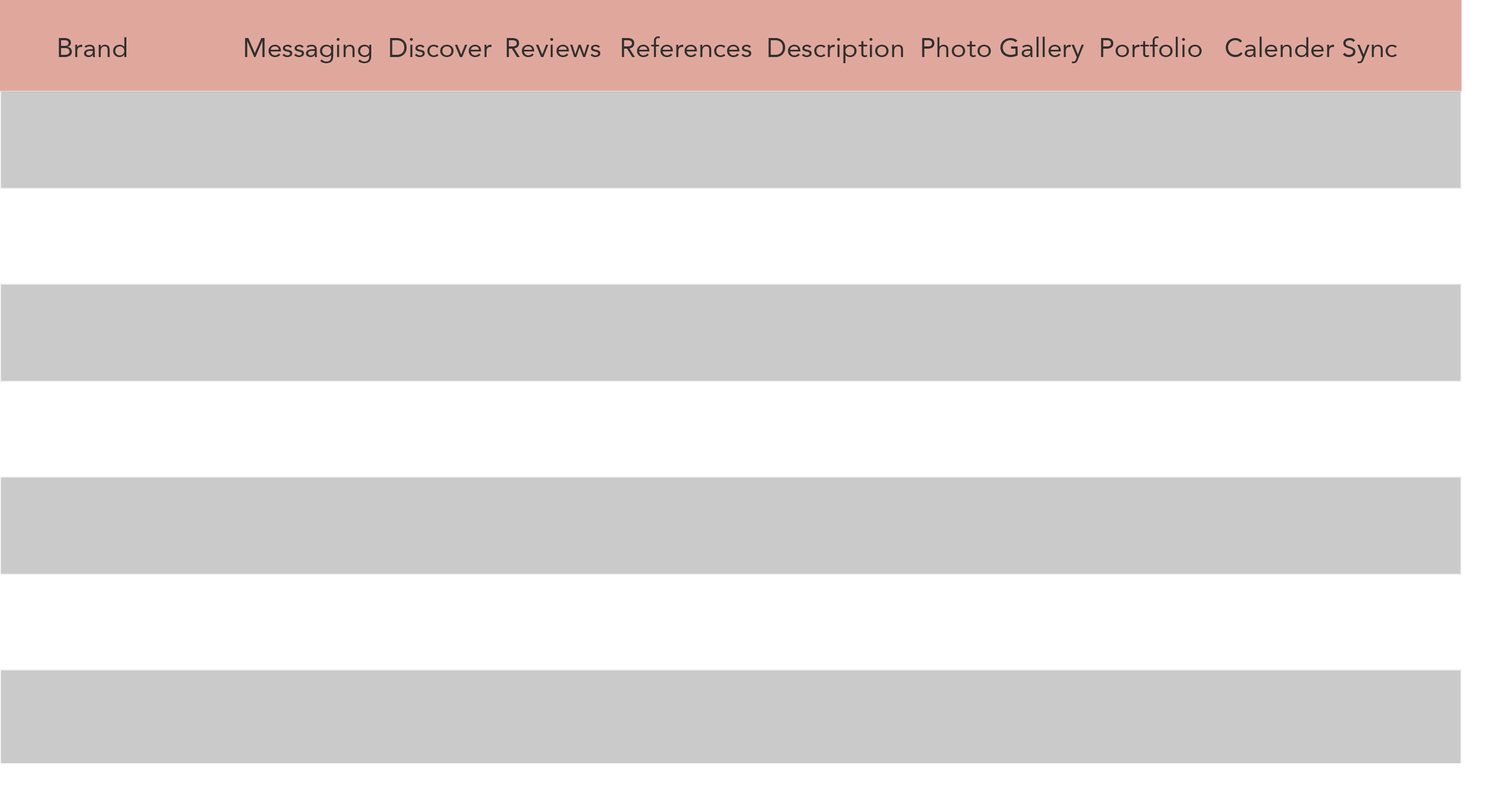
<style>
.page{position:relative;width:1485px;height:803px;background:#cacaca}
.page>*{position:absolute;margin:0}
.t1{font:26.8px "Avenir-Roman";color:#312f2f}
</style>
<div class="page">
<p class="t1" style="left:59px;top:37px;width:67px;height:20px">Brand</p>
<p class="t1" style="left:245px;top:38px;width:126px;height:25px">Messaging</p>
<p class="t1" style="left:390px;top:38px;width:102px;height:19px">Discover</p>
<p class="t1" style="left:507px;top:38px;width:94px;height:19px">Reviews</p>
<p class="t1" style="left:622px;top:36px;width:129px;height:21px">References</p>
<p class="t1" style="left:768px;top:38px;width:136px;height:25px">Description</p>
<p class="t1" style="left:922px;top:36px;width:162px;height:27px">Photo Gallery</p>
<p class="t1" style="left:1101px;top:36px;width:101px;height:21px">Portfolio</p>
<p class="t1" style="left:1226px;top:36px;width:171px;height:27px">Calender Sync</p>
</div>
